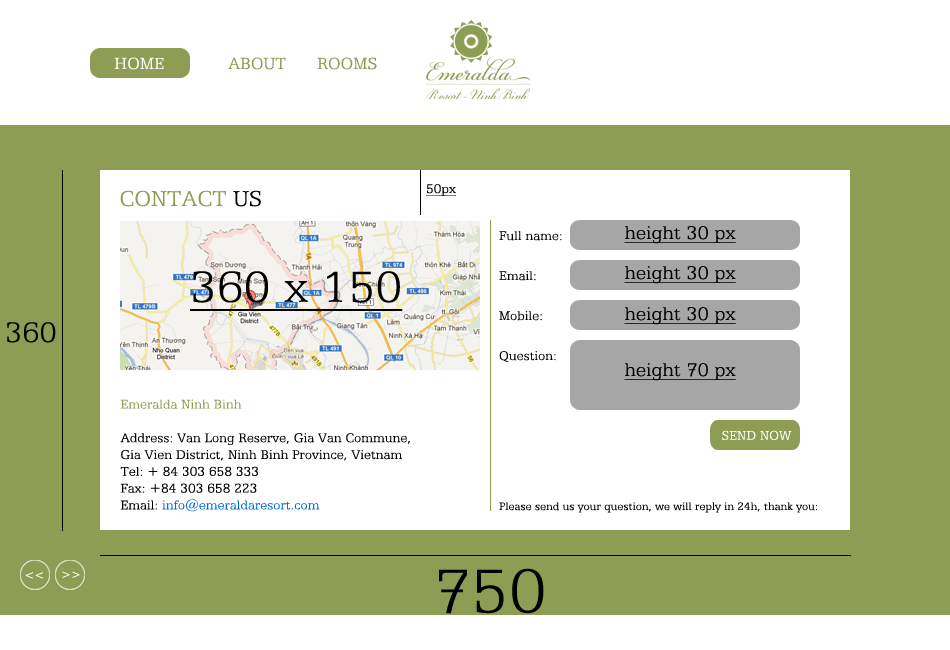
<style>
.page{position:relative;width:950px;height:650px;background:#ffffff}
.page>*{position:absolute;margin:0}
.t1{font:18px "UVNAiCapNhe";color:#ffffff}
.t2{font:18px "UVNAiCapNhe";color:#8d9d54}
.t3{font:14px "UVNAiCapNhe";color:#000000;text-decoration:underline}
.t4{font:24px "UVNAiCapNhe";color:#8d9d54}
.t5{font:24px "UVNAiCapNhe";color:#000000}
.t6{font:14px "UVNAiCapNhe";color:#000000}
.t7{font:20.4px "UVNAiCapNhe";color:#000000;text-decoration:underline}
.t8{font:48.7px "UVNAiCapNhe";color:#000000;text-decoration:underline}
.t9{font:31.3px "UVNAiCapNhe";color:#000000}
.t10{font:14px "UVNAiCapNhe";color:#8d9d54}
.t11{font:14px "UVNAiCapNhe";color:#006be4}
.t12{font:14px "UVNAiCapNhe";color:#ffffff}
.t13{font:12px "UVNAiCapNhe";color:#000000}
.t14{font:68.8px "UVNAiCapNhe";color:#000000}
.t15{font:12px "UVNAiCapNhe";color:#ffffff}
</style>
<div class="page">
<p class="t1" style="left:114px;top:57px;width:50px;height:13px">HOME</p>
<p class="t2" style="left:228px;top:57px;width:58px;height:13px">ABOUT</p>
<p class="t2" style="left:317px;top:57px;width:60px;height:13px">ROOMS</p>
<p class="t3" style="left:426px;top:184px;width:30px;height:12px">50px</p>
<p class="t4" style="left:120px;top:190px;width:141px;height:17px">CONTACT <span class="t5">US</span></p>
<p class="t6" style="left:499px;top:231px;width:63px;height:10px">Full name:</p>
<p class="t7" style="left:624px;top:226px;width:112px;height:18px">height 30 px</p>
<p class="t7" style="left:624px;top:266px;width:112px;height:18px">height 30 px</p>
<p class="t8" style="left:190px;top:271px;width:213px;height:40px">360 x 150</p>
<p class="t6" style="left:499px;top:271px;width:37px;height:10px">Email:</p>
<p class="t6" style="left:499px;top:311px;width:43px;height:10px">Mobile:</p>
<p class="t7" style="left:624px;top:307px;width:112px;height:18px">height 30 px</p>
<p class="t9" style="left:7px;top:322px;width:49px;height:21px">360</p>
<p class="t6" style="left:499px;top:351px;width:57px;height:11px">Question:</p>
<p class="t7" style="left:624px;top:363px;width:112px;height:18px">height 70 px</p>
<p class="t6" style="left:120px;top:399px;width:290px;height:113px"><span class="t10">Emeralda Ninh Binh<br></span><br>Address: Van Long Reserve, Gia Van Commune,<br>Gia Vien District, Ninh Binh Province, Vietnam<br>Tel: + 84 303 658 333<br>Fax: +84 303 658 223<br>Email: <span class="t11">info@emeraldaresort.com</span></p>
<p class="t12" style="left:722px;top:430px;width:70px;height:10px">SEND NOW</p>
<p class="t13" style="left:499px;top:502px;width:318px;height:11px">Please send us your question, we will reply in 24h, thank you:</p>
<p class="t14" style="left:439px;top:568px;width:105px;height:46px">750</p>
<p class="t15" style="left:25px;top:572px;width:18px;height:7px">&lt;&lt;</p>
<p class="t15" style="left:62px;top:571px;width:18px;height:7px">&gt;&gt;</p>
</div>
